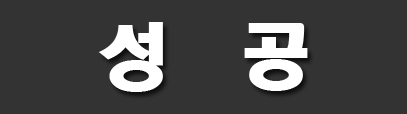
<style>
.page{position:relative;width:407px;height:114px;background:#333333}
.page>*{position:absolute;margin:0}
.t1{font:72px "HeadlineR-HM";color:#ffffff}
</style>
<div class="page">
<p class="t1" style="left:98px;top:22px;width:210px;height:70px">성  공</p>
</div>
